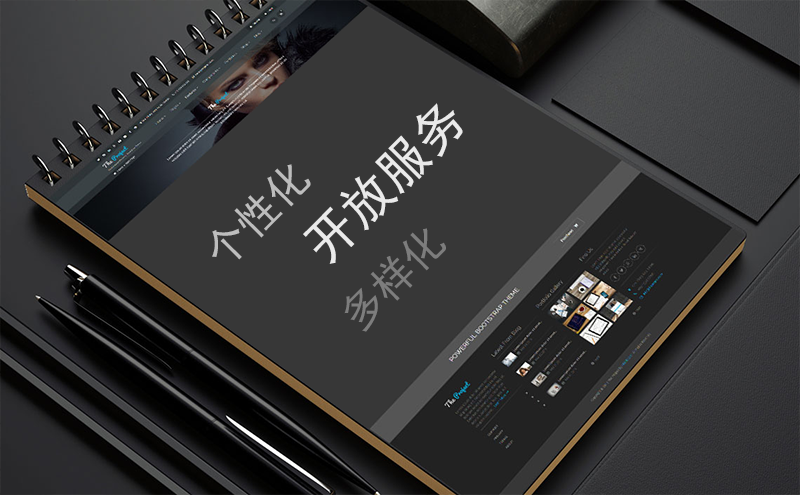
<style>
.page{position:relative;width:800px;height:495px;background:#373737}
.page>*{position:absolute;margin:0}
.t1{font:50.5px "SimHei";color:#eaeaea}
.t2{font:42.1px "SimHei";color:#bdbdbd}
.t3{font:42.1px "SimHei";color:#7d7d7d}
</style>
<div class="page">
<p class="t1" style="left:212px;top:103px;width:251px;height:229px;rotate:-45deg"><span class="t2">个性化<br>   </span>开放服务<br>  <span class="t3">多样化</span></p>
</div>
